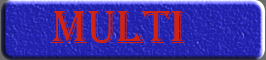
<style>
.page{position:relative;width:266px;height:60px}
.page>*{position:absolute;margin:0}
.t1{font:48px "Algerian";color:#d12311}
</style>
<div class="page">
<p class="t1" style="left:51px;top:11px;width:134px;height:32px">MULTI</p>
</div>
